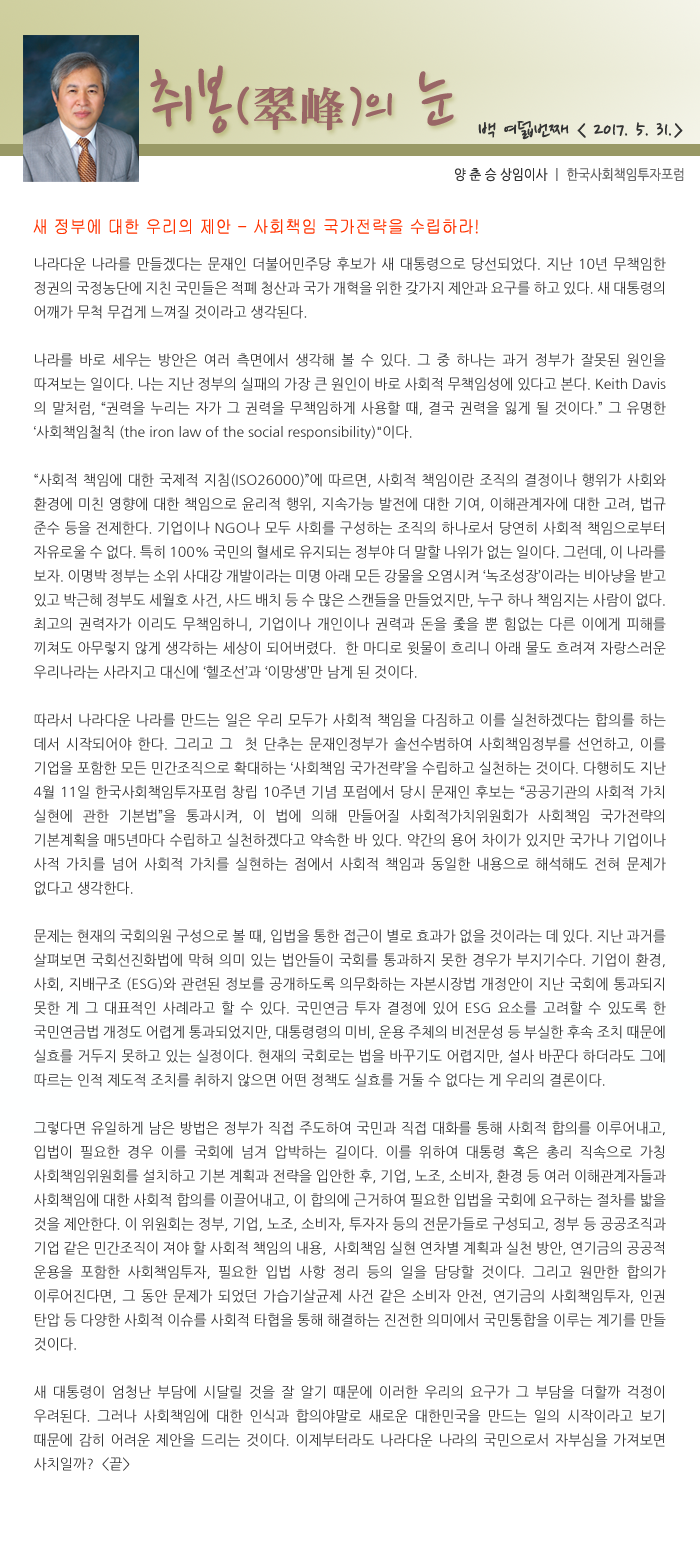
<style>
.page{position:relative;width:700px;height:1559px;background:#ffffff}
.page>*{position:absolute;margin:0}
.t1{font:77.5px "NanumPen";color:#996666}
.t2{font:60px "NanumPen";color:#996666}
.t3{font:48px "H2mjrE";color:#996666}
.t4{font:24px "NanumPen";color:#333333}
.t5{font:14px "NanumGothic";color:#666666;scale:0.9 1}
.t6{font:14px "NanumGothic";color:#333333;scale:0.9 1}
.t7{font:18px "Gulim";color:#ff3300;scale:0.9 1}
.t8{font:14px/24px "NanumGothic";color:#333333}
</style>
<div class="page">
<p class="t1" style="left:150px;top:65px;width:304px;height:69px">취봉<span class="t2">(</span><span class="t3">翠峰</span><span class="t2">)</span><span class="t2">의</span> 눈</p>
<p class="t4" style="left:478px;top:121px;width:205px;height:19px">백 여덟번째 &lt; 2017. 5. 31.&gt;</p>
<p class="t5" style="left:455px;top:168px;width:229px;height:14px"><span class="t6">양 춘 승 상임이사 </span>ㅣ 한국사회책임투자포럼</p>
<p class="t7" style="left:33px;top:219px;width:445px;height:15px">새 정부에 대한 우리의 제안 - 사회책임 국가전략을 수립하라!</p>
<p class="t8" style="left:34px;top:257px;width:632px;height:1214px;text-align:justify">나라다운 나라를 만들겠다는 문재인 더불어민주당 후보가 새 대통령으로 당선되었다. 지난 10년 무책임한 정권의 국정농단에 지친 국민들은 적폐 청산과 국가 개혁을 위한 갖가지 제안과 요구를 하고 있다. 새 대통령의 어깨가 무척 무겁게 느껴질 것이라고 생각된다.<br><br>나라를 바로 세우는 방안은 여러 측면에서 생각해 볼 수 있다. 그 중 하나는 과거 정부가 잘못된 원인을 따져보는 일이다. 나는 지난 정부의 실패의 가장 큰 원인이 바로 사회적 무책임성에 있다고 본다. Keith Davis의 말처럼, “권력을 누리는 자가 그 권력을 무책임하게 사용할 때, 결국 권력을 잃게 될 것이다.” 그 유명한 ‘사회책임철칙 (the iron law of the social responsibility)"이다. <br><br>“사회적 책임에 대한 국제적 지침(ISO26000)”에 따르면, 사회적 책임이란 조직의 결정이나 행위가 사회와 환경에 미친 영향에 대한 책임으로 윤리적 행위, 지속가능 발전에 대한 기여, 이해관계자에 대한 고려, 법규 준수 등을 전제한다. 기업이나 NGO나 모두 사회를 구성하는 조직의 하나로서 당연히 사회적 책임으로부터 자유로울 수 없다. 특히 100% 국민의 혈세로 유지되는 정부야 더 말할 나위가 없는 일이다. 그런데, 이 나라를 보자. 이명박 정부는 소위 사대강 개발이라는 미명 아래 모든 강물을 오염시켜 ‘녹조성장’이라는 비아냥을 받고 있고 박근혜 정부도 세월호 사건, 사드 배치 등 수 많은 스캔들을 만들었지만, 누구 하나 책임지는 사람이 없다. 최고의 권력자가 이리도 무책임하니, 기업이나 개인이나 권력과 돈을 좇을 뿐 힘없는 다른 이에게 피해를 끼쳐도 아무렇지 않게 생각하는 세상이 되어버렸다.  한 마디로 윗물이 흐리니 아래 물도 흐려져 자랑스러운 우리나라는 사라지고 대신에 ‘헬조선’과 ‘이망생’만 남게 된 것이다.<br><br>따라서 나라다운 나라를 만드는 일은 우리 모두가 사회적 책임을 다짐하고 이를 실천하겠다는 합의를 하는 데서 시작되어야 한다. 그리고 그  첫 단추는 문재인정부가 솔선수범하여 사회책임정부를 선언하고, 이를 기업을 포함한 모든 민간조직으로 확대하는 ‘사회책임 국가전략’을 수립하고 실천하는 것이다. 다행히도 지난 4월 11일 한국사회책임투자포럼 창립 10주년 기념 포럼에서 당시 문재인 후보는 “공공기관의 사회적 가치 실현에 관한 기본법”을 통과시켜, 이 법에 의해 만들어질 사회적가치위원회가 사회책임 국가전략의 기본계획을 매5년마다 수립하고 실천하겠다고 약속한 바 있다. 약간의 용어 차이가 있지만 국가나 기업이나 사적 가치를 넘어 사회적 가치를 실현하는 점에서 사회적 책임과 동일한 내용으로 해석해도 전혀 문제가 없다고 생각한다.<br><br>문제는 현재의 국회의원 구성으로 볼 때, 입법을 통한 접근이 별로 효과가 없을 것이라는 데 있다. 지난 과거를 살펴보면 국회선진화법에 막혀 의미 있는 법안들이 국회를 통과하지 못한 경우가 부지기수다. 기업이 환경, 사회, 지배구조 (ESG)와 관련된 정보를 공개하도록 의무화하는 자본시장법 개정안이 지난 국회에 통과되지 못한 게 그 대표적인 사례라고 할 수 있다. 국민연금 투자 결정에 있어 ESG 요소를 고려할 수 있도록 한 국민연금법 개정도 어렵게 통과되었지만, 대통령령의 미비, 운용 주체의 비전문성 등 부실한 후속 조치 때문에 실효를 거두지 못하고 있는 실정이다. 현재의 국회로는 법을 바꾸기도 어렵지만, 설사 바꾼다 하더라도 그에 따르는 인적 제도적 조치를 취하지 않으면 어떤 정책도 실효를 거둘 수 없다는 게 우리의 결론이다.<br><br>그렇다면 유일하게 남은 방법은 정부가 직접 주도하여 국민과 직접 대화를 통해 사회적 합의를 이루어내고, 입법이 필요한 경우 이를 국회에 넘겨 압박하는 길이다. 이를 위하여 대통령 혹은 총리 직속으로 가칭 사회책임위원회를 설치하고 기본 계획과 전략을 입안한 후, 기업, 노조, 소비자, 환경 등 여러 이해관계자들과 사회책임에 대한 사회적 합의를 이끌어내고, 이 합의에 근거하여 필요한 입법을 국회에 요구하는 절차를 밟을 것을 제안한다. 이 위원회는 정부, 기업, 노조, 소비자, 투자자 등의 전문가들로 구성되고, 정부 등 공공조직과 기업 같은 민간조직이 져야 할 사회적 책임의 내용,  사회책임 실현 연차별 계획과 실천 방안, 연기금의 공공적 운용을 포함한 사회책임투자, 필요한 입법 사항 정리 등의 일을 담당할 것이다. 그리고 원만한 합의가 이루어진다면, 그 동안 문제가 되었던 가습기살균제 사건 같은 소비자 안전, 연기금의 사회책임투자, 인권 탄압 등 다양한 사회적 이슈를 사회적 타협을 통해 해결하는 진전한 의미에서 국민통합을 이루는 계기를 만들 것이다.<br><br>새 대통령이 엄청난 부담에 시달릴 것을 잘 알기 때문에 이러한 우리의 요구가 그 부담을 더할까 걱정이 우려된다. 그러나 사회책임에 대한 인식과 합의야말로 새로운 대한민국을 만드는 일의 시작이라고 보기 때문에 감히 어려운 제안을 드리는 것이다. 이제부터라도 나라다운 나라의 국민으로서 자부심을 가져보면 사치일까?  &lt;끝&gt;</p>
</div>
